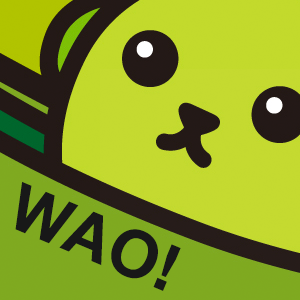
<style>
.page{position:relative;width:300px;height:300px}
.page>*{position:absolute;margin:0}
.t1{font:65px "HelveticaNeue-Bold";letter-spacing:0.016em;color:#181818}
</style>
<div class="page">
<p class="t1" style="left:15px;top:181px;width:166px;height:110px;rotate:23deg">WAO!</p>
</div>
